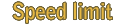
<style>
.page{position:relative;width:128px;height:24px;background:#ffffff}
.page>*{position:absolute;margin:0}
.t1{font:22px "BellGothicStd-Bold";letter-spacing:-0.025em;color:#e5b743}
</style>
<div class="page">
<p class="t1" style="left:13px;top:2px;width:99px;height:21px">Speed limit</p>
</div>
